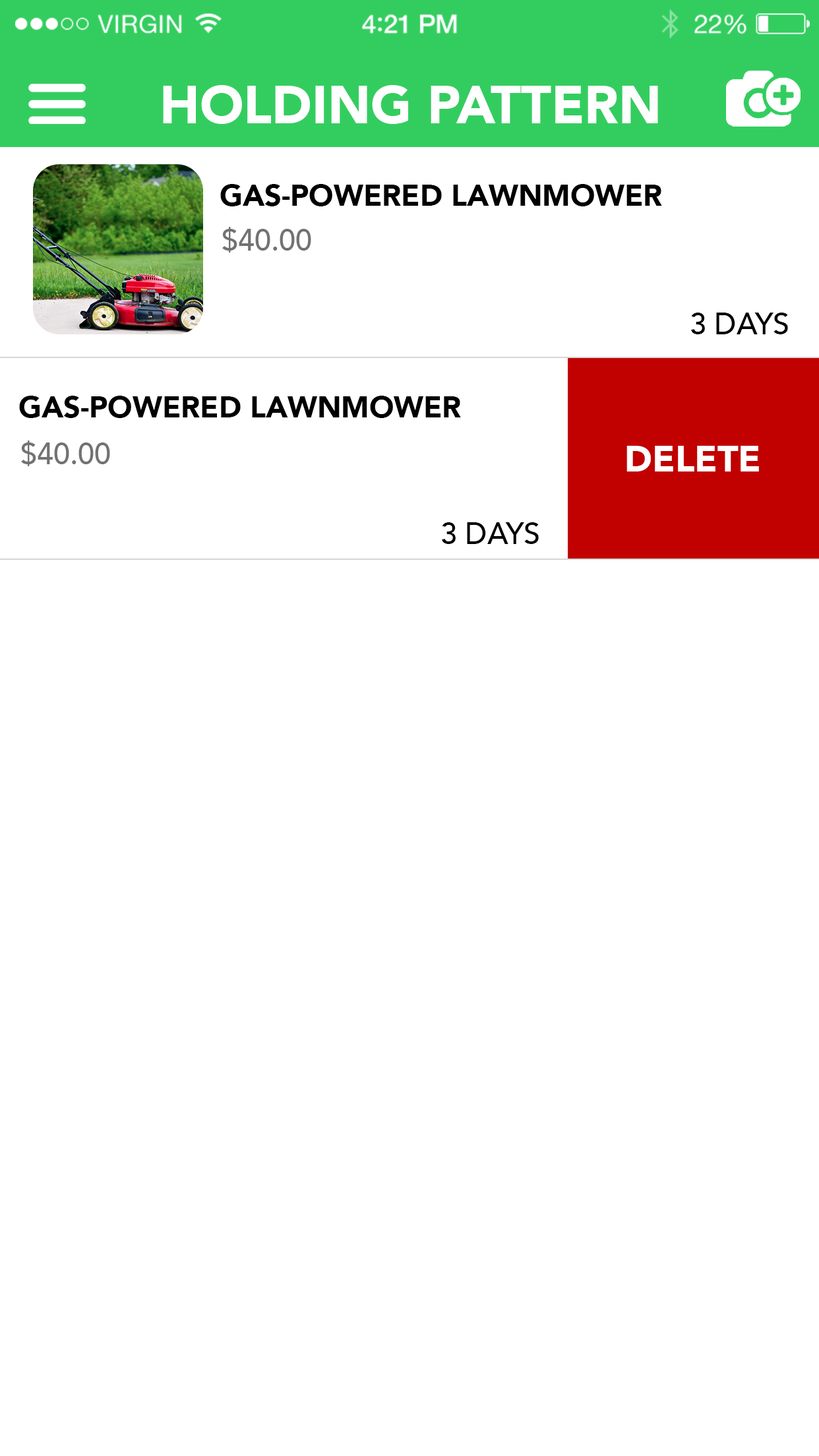
<style>
.page{position:relative;width:819px;height:1456px;background:#ffffff}
.page>*{position:absolute;margin:0}
.t1{font:52.8px "Avenir-Black";color:#ffffff}
.t2{font:29.7px "Avenir-Black";color:#000000}
.t3{font:29.7px "Avenir-Medium";color:#727272}
.t4{font:29.7px "Avenir-Medium";color:#000000}
.t5{font:36.3px "Avenir-Black";color:#ffffff}
</style>
<div class="page">
<p class="t1" style="left:163px;top:85px;width:495px;height:39px">HOLDING PATTERN</p>
<p class="t2" style="left:220px;top:184px;width:442px;height:22px">GAS-POWERED LAWNMOWER</p>
<p class="t3" style="left:222px;top:227px;width:89px;height:26px">$40.00</p>
<p class="t4" style="left:691px;top:313px;width:97px;height:21px">3 DAYS</p>
<p class="t2" style="left:19px;top:396px;width:442px;height:22px">GAS-POWERED LAWNMOWER</p>
<p class="t3" style="left:21px;top:440px;width:89px;height:26px">$40.00</p>
<p class="t5" style="left:626px;top:446px;width:133px;height:25px">DELETE</p>
<p class="t4" style="left:442px;top:522px;width:97px;height:22px">3 DAYS</p>
</div>
